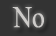
<style>
.page{position:relative;width:56px;height:36px;background:#333333}
.page>*{position:absolute;margin:0}
.t1{font:30px "TimesNewRomanPSMT";color:#cdcbc9;scale:0.86 1}
</style>
<div class="page">
<p class="t1" style="left:12px;top:7px;width:32px;height:21px">No</p>
</div>
